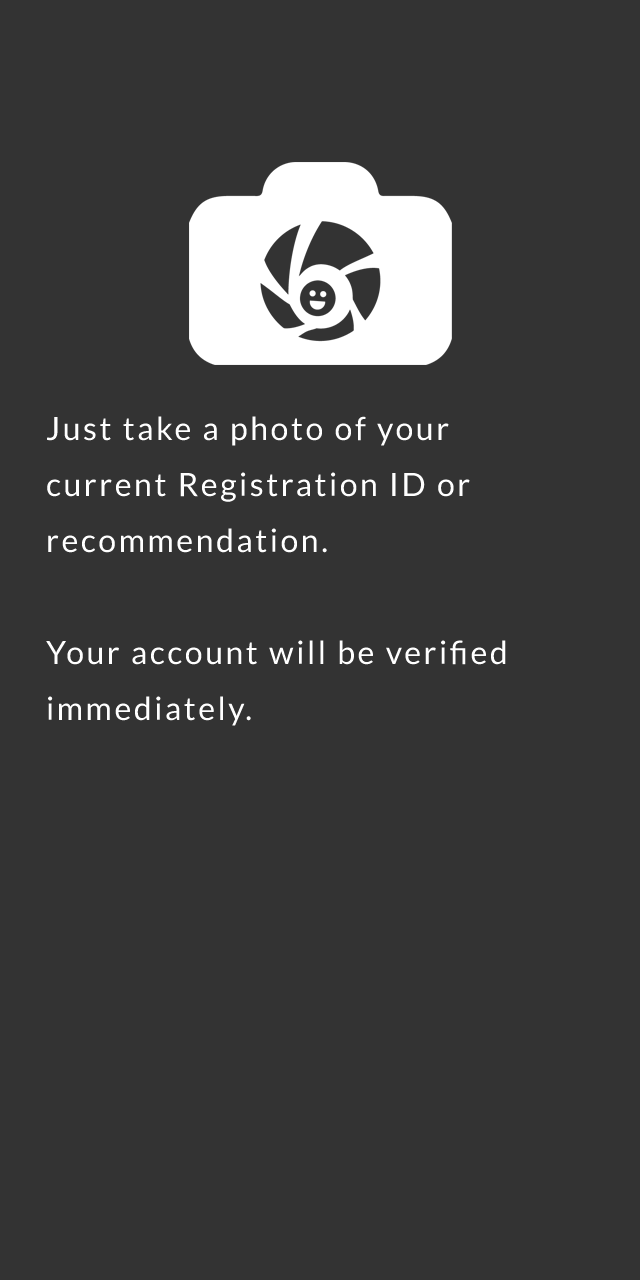
<style>
.page{position:relative;width:640px;height:1280px;background:#333333}
.page>*{position:absolute;margin:0}
.t1{font:32px/56px "Lato-Regular";letter-spacing:0.08em;color:#ffffff}
</style>
<div class="page">
<p class="t1" style="left:46px;top:416px;width:460px;height:310px">Just take a photo of your <br>current Registration ID or <br>recommendation.<br><br>Your account will be verified<br>immediately.</p>
</div>
